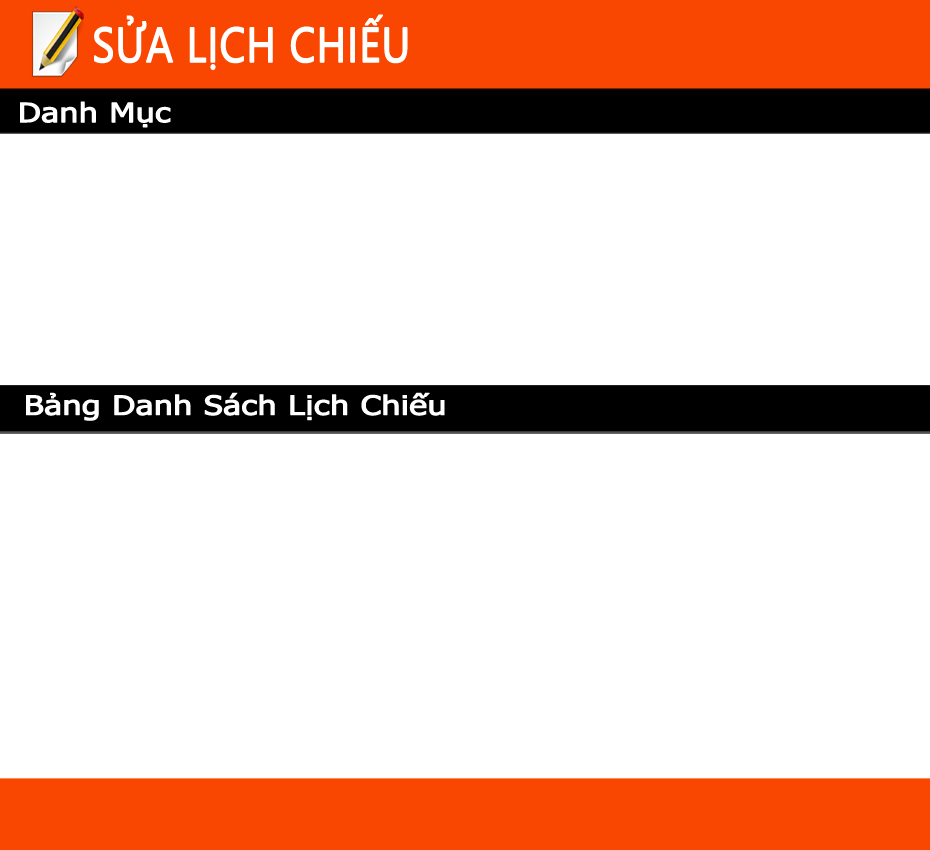
<style>
.page{position:relative;width:930px;height:850px;background:#ffffff}
.page>*{position:absolute;margin:0}
.t1{font:48.7px "SegoeUI";color:#ffffff;text-transform:uppercase;font-weight:bold;scale:0.85 1}
.t2{font:26.6px "Tahoma";color:#ffffff;font-weight:bold;scale:1.25 1}
</style>
<div class="page">
<p class="t1" style="left:94px;top:14px;width:314px;height:57px">SỬA LỊCH CHIẾU</p>
<p class="t2" style="left:20px;top:101px;width:151px;height:27px">Danh Mục</p>
<p class="t2" style="left:26px;top:392px;width:419px;height:29px">Bảng Danh Sách Lịch Chiếu</p>
</div>
